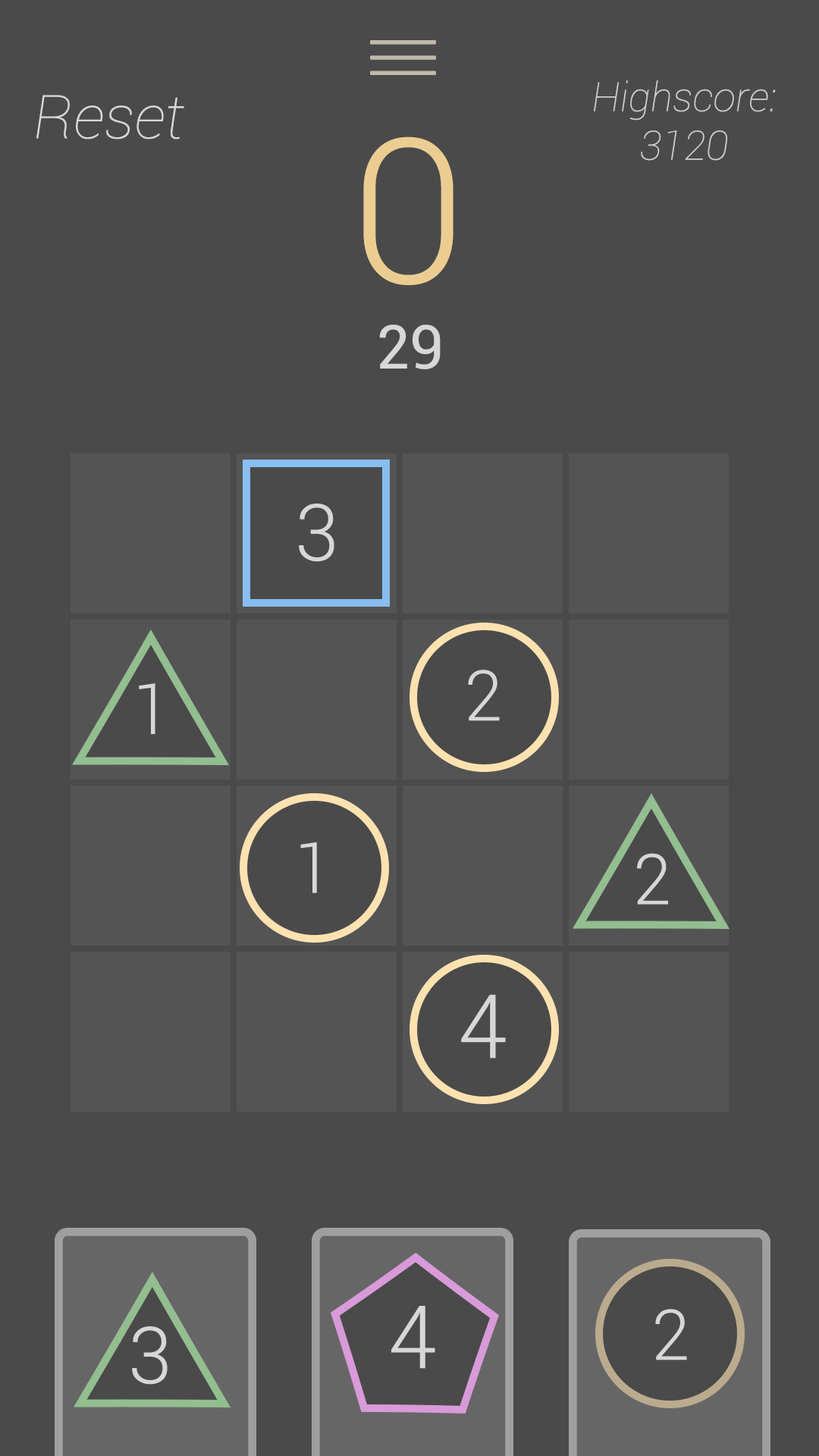
<style>
.page{position:relative;width:819px;height:1456px;background:#4a4a4a}
.page>*{position:absolute;margin:0}
.t1{font:40.4px "Roboto-ThinItalic";color:#cdcdcd}
.t2{font:60.7px "Roboto-ThinItalic";color:#d7d7d7}
.t3{font:202.2px "Roboto-Light";color:#ebcd92}
.t4{font:60.7px "Roboto-Regular";color:#d7d7d7}
.t5{font:78.8px "Roboto-Light";color:#d7d7d7}
.t6{font:70.2px "Roboto-Light";color:#d7d7d7}
.t7{font:88.8px "Roboto-Light";color:#d7d7d7}
.t8{font:87.4px "Roboto-Light";color:#d7d7d7}
</style>
<div class="page">
<p class="t1" style="left:594px;top:80px;width:182px;height:81px;text-align:center">Highscore:<br>3120</p>
<p class="t2" style="left:36px;top:95px;width:148px;height:45px">Reset</p>
<p class="t3" style="left:363px;top:136px;width:90px;height:149px">0</p>
<p class="t4" style="left:379px;top:325px;width:62px;height:44px">29</p>
<p class="t5" style="left:299px;top:504px;width:35px;height:58px">3</p>
<p class="t6" style="left:468px;top:670px;width:32px;height:51px">2</p>
<p class="t6" style="left:139px;top:683px;width:16px;height:51px">1</p>
<p class="t6" style="left:300px;top:842px;width:17px;height:51px">1</p>
<p class="t6" style="left:637px;top:853px;width:31px;height:52px">2</p>
<p class="t7" style="left:461px;top:994px;width:45px;height:65px">4</p>
<p class="t8" style="left:391px;top:1306px;width:44px;height:63px">4</p>
<p class="t6" style="left:655px;top:1309px;width:32px;height:51px">2</p>
<p class="t5" style="left:132px;top:1326px;width:36px;height:59px">3</p>
</div>
